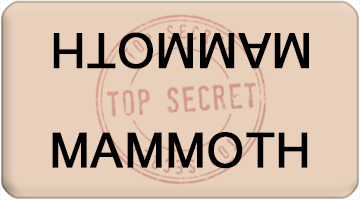
<style>
.page{position:relative;width:360px;height:200px;background:#e8d0bb}
.page>*{position:absolute;margin:0}
.t1{font:48px "ArialMT";color:#000000;font-weight:bold}
</style>
<div class="page">
<p class="t1" style="left:53px;top:32px;width:256px;height:37px;rotate:180deg">MAMMOTH</p>
<p class="t1" style="left:52px;top:132px;width:256px;height:37px">MAMMOTH</p>
</div>
